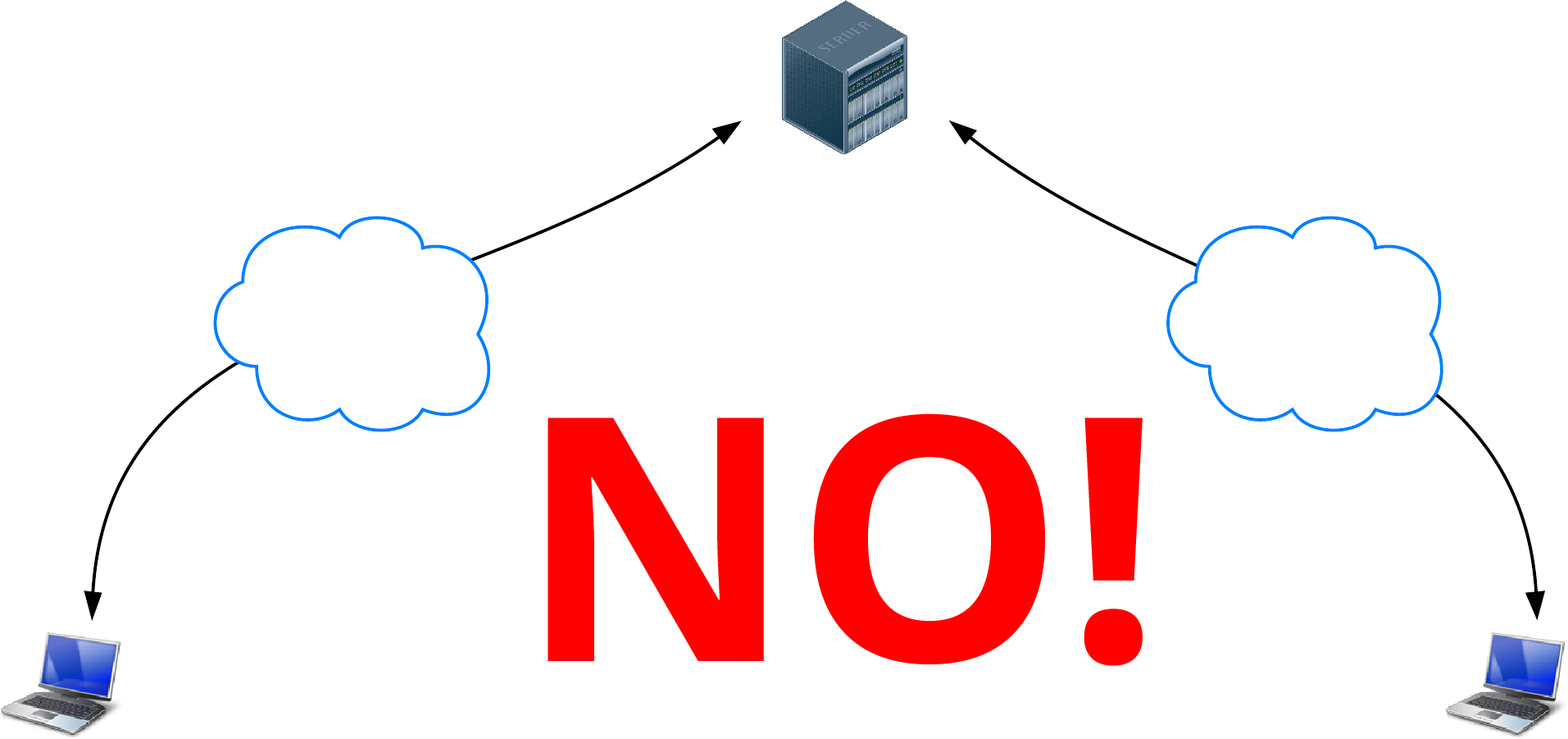
<style>
.page{position:relative;width:1568px;height:739px;background:#ffffff}
.page>*{position:absolute;margin:0}
.t1{font:340.2px "OpenSans-Bold";color:#ff0000}
</style>
<div class="page">
<p class="t1" style="left:548px;top:413px;width:595px;height:253px">NO!</p>
</div>
